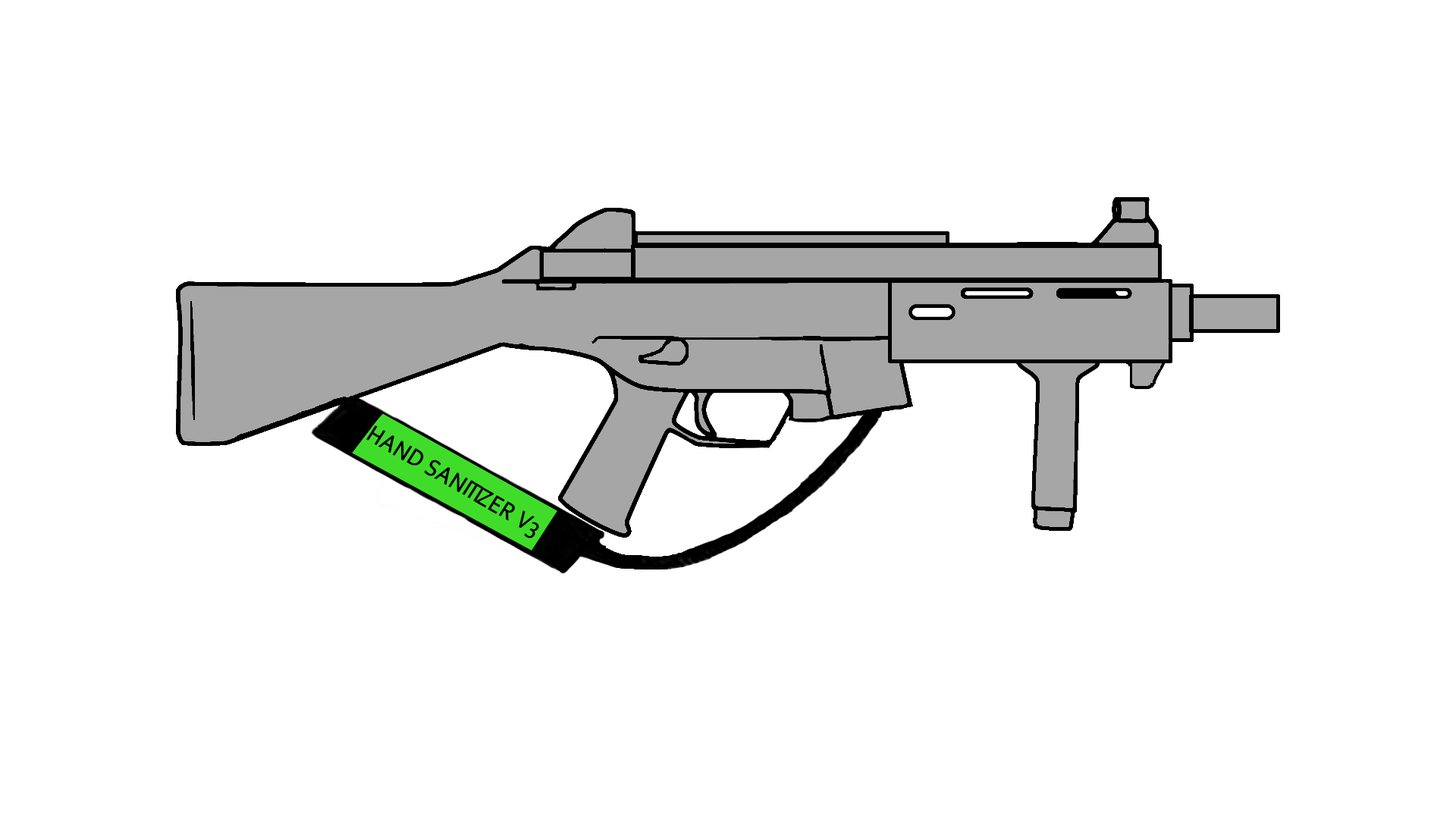
<style>
.page{position:relative;width:1456px;height:819px;background:#ffffff}
.page>*{position:absolute;margin:0}
.t1{font:24.8px "Corbel";letter-spacing:0.005em;color:#000000;font-weight:bold;scale:0.89 1}
.t2{font:24.8px "Corbel";letter-spacing:-0.136em;color:#000000;font-weight:bold;scale:0.89 1}
</style>
<div class="page">
<p class="t1" style="left:366px;top:425px;width:173px;height:113px;rotate:30deg">HAND SAN<span class="t2">ITI</span>ZER V3</p>
</div>
